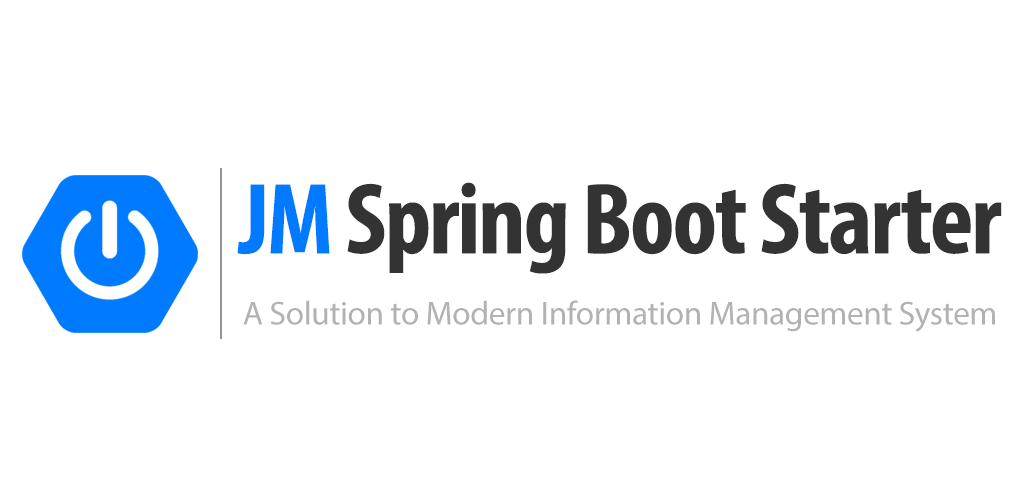
<style>
.page{position:relative;width:1024px;height:500px;background:#ffffff}
.page>*{position:absolute;margin:0}
.t1{font:102px "MyriadPro-BoldCond";letter-spacing:-0.022em;color:#333333}
.t2{font:102px "MyriadPro-BoldCond";letter-spacing:-0.022em;color:#007aff}
.t3{font:33.3px "MyriadPro-Regular";letter-spacing:-0.01em;color:#b4b2b1}
</style>
<div class="page">
<p class="t1" style="left:237px;top:182px;width:765px;height:92px"><span class="t2">JM </span>Spring Boot Starter</p>
<p class="t3" style="left:243px;top:300px;width:752px;height:32px">A Solution to Modern Information Management System</p>
</div>
